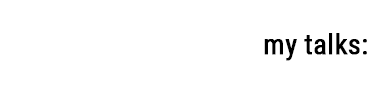
<style>
.page{position:relative;width:367px;height:100px;background:#ffffff}
.page>*{position:absolute;margin:0}
.t1{font:27.8px "RobotoCondensed-Regular";color:#000000;font-weight:bold}
</style>
<div class="page">
<p class="t1" style="left:264px;top:33px;width:103px;height:28px">my talks:</p>
</div>
